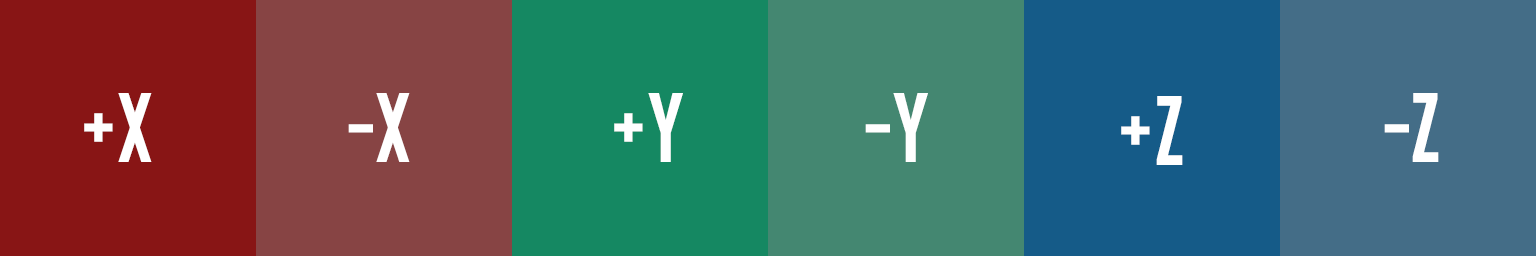
<style>
.page{position:relative;width:1536px;height:256px}
.page>*{position:absolute;margin:0}
.t1{font:72px "Gobold";color:#ffffff}
</style>
<div class="page">
<p class="t1" style="left:84px;top:93px;width:68px;height:69px">+X</p>
<p class="t1" style="left:348px;top:93px;width:62px;height:69px">-X</p>
<p class="t1" style="left:614px;top:93px;width:69px;height:69px">+Y</p>
<p class="t1" style="left:865px;top:93px;width:63px;height:69px">-Y</p>
<p class="t1" style="left:1121px;top:96px;width:62px;height:69px">+Z</p>
<p class="t1" style="left:1384px;top:93px;width:55px;height:69px">-Z</p>
</div>
